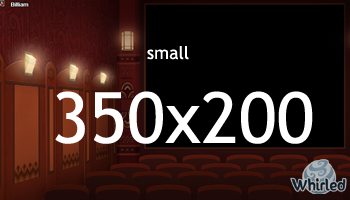
<style>
.page{position:relative;width:350px;height:200px;background:#000000}
.page>*{position:absolute;margin:0}
.t1{font:17.6px "TrebuchetMS";color:#ffffff}
.t2{font:70.6px "TrebuchetMS";color:#ffffff}
</style>
<div class="page">
<p class="t1" style="left:147px;top:46px;width:42px;height:14px">small</p>
<p class="t2" style="left:55px;top:91px;width:258px;height:53px">350x200</p>
</div>
